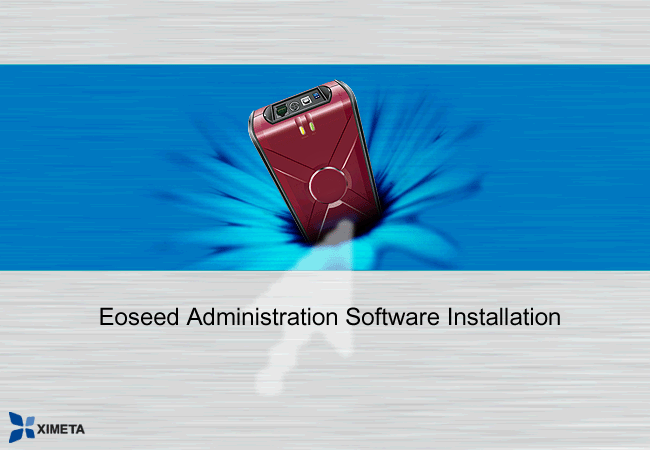
<style>
.page{position:relative;width:650px;height:450px;background:#d8d8d8}
.page>*{position:absolute;margin:0}
.t1{font:24px "ArialUnicodeMS";color:#000000}
</style>
<div class="page">
<p class="t1" style="left:100px;top:307px;width:460px;height:19px">Eoseed Administration Software Installation</p>
</div>
